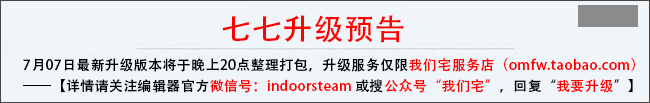
<style>
.page{position:relative;width:650px;height:103px;background:#f0f5f9}
.page>*{position:absolute;margin:0}
.t1{font:29.4px "AdobeHeitiStd-Regular";letter-spacing:0.025em;color:#ff0000}
.t2{font:13.7px/21px "AdobeHeitiStd-Regular";letter-spacing:0.025em;color:#000000}
.t3{font:13.7px/21px "AdobeHeitiStd-Regular";letter-spacing:0.025em;color:#ff0000}
</style>
<div class="page">
<p class="t1" style="left:222px;top:15px;width:182px;height:28px">七七升级预告</p>
<p class="t2" style="left:23px;top:58px;width:612px;height:35px">7月07日最新升级版本将于晚上20点整理打包，升级服务仅限<span class="t3">我们宅服务店（omfw.taobao.com）<br></span>——【详情请关注编辑器官方<span class="t3">微信号：indoorsteam</span> 或搜<span class="t3">公众号“我们宅”</span>，回复“<span class="t3">我要升级</span>”】</p>
</div>
